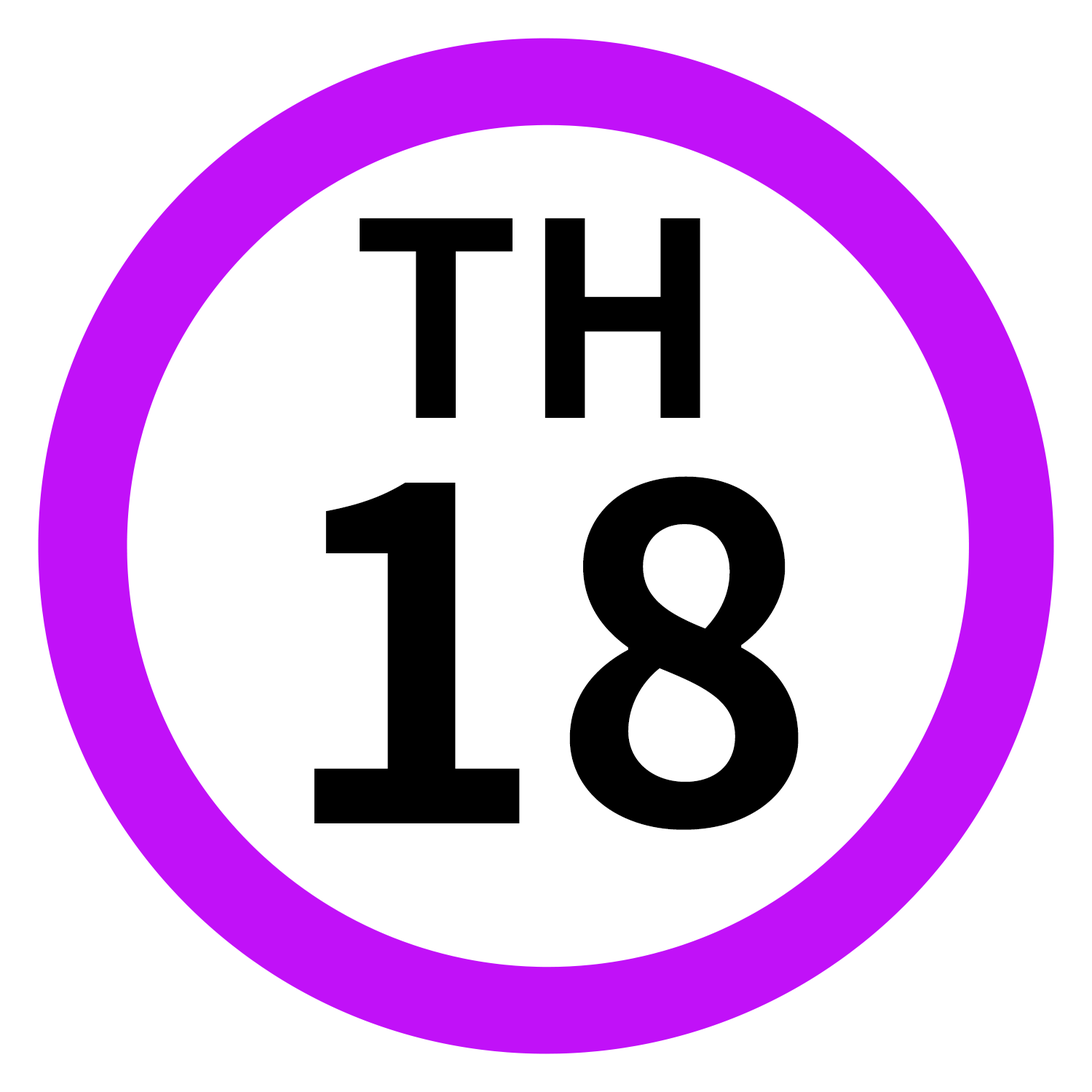
<style>
.page{position:relative;width:1092px;height:1092px;background:#ffffff}
.page>*{position:absolute;margin:0}
.t1{font:269.8px "NotoSansJP-Bold";color:#000000}
.t2{font:460.5px "NotoSansJP-Bold";color:#000000}
</style>
<div class="page">
<p class="t1" style="left:360px;top:218px;width:340px;height:200px">TH</p>
<p class="t2" style="left:314px;top:476px;width:485px;height:354px">18</p>
</div>
